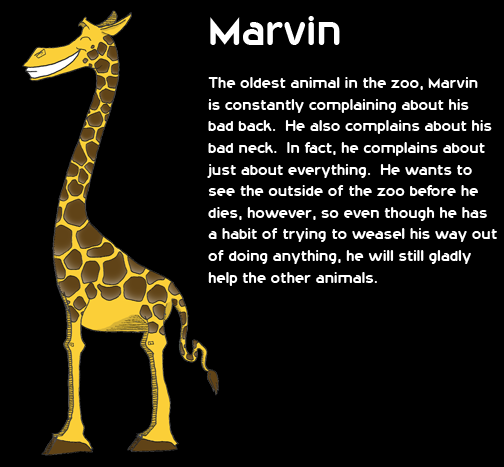
<style>
.page{position:relative;width:504px;height:467px;background:#000000}
.page>*{position:absolute;margin:0}
.t1{font:18px "20thCenturyFont";color:#ffffff}
.t2{font:48px "20thCenturyFont";color:#ffffff}
</style>
<div class="page">
<p class="t1" style="left:207px;top:16px;width:290px;height:270px"><span class="t2">Marvin<br></span><br>The oldest animal in the zoo, Marvin <br>is constantly complaining about his <br>bad back.  He also complains about his <br>bad neck.  In fact, he complains about <br>just about everything.  He wants to <br>see the outside of the zoo before he <br>dies, however, so even though he has <br>a habit of trying to weasel his way out <br>of doing anything, he will still gladly <br>help the other animals.</p>
</div>
